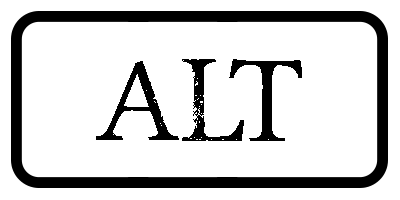
<style>
.page{position:relative;width:400px;height:200px;background:#ffffff}
.page>*{position:absolute;margin:0}
.t1{font:130px "Portmanteau-Regular";letter-spacing:-0.06em;color:#000000;font-variant:small-caps}
</style>
<div class="page">
<p class="t1" style="left:96px;top:59px;width:206px;height:82px">alt</p>
</div>
